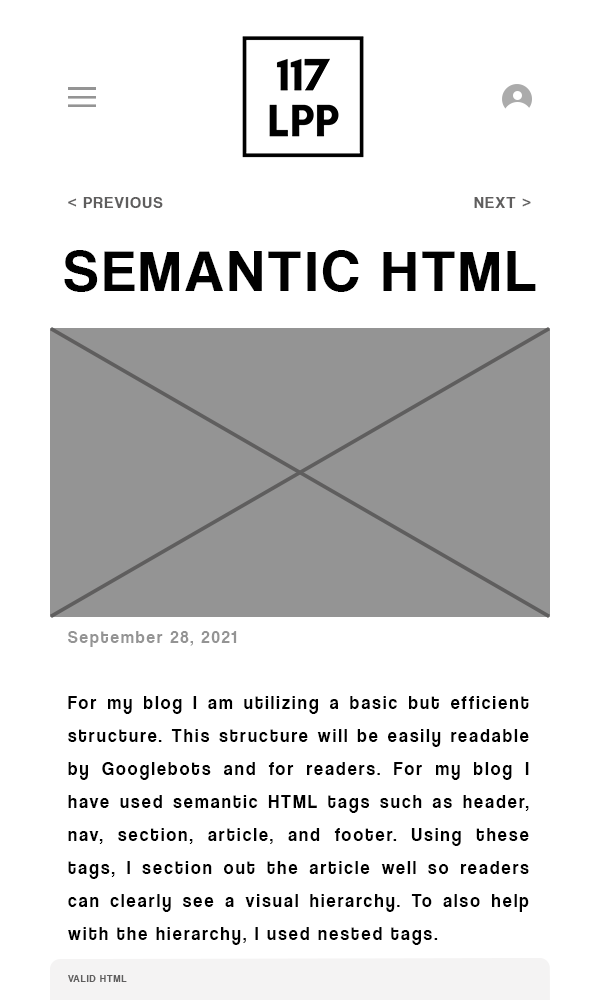
<style>
.page{position:relative;width:600px;height:1000px;background:#ffffff}
.page>*{position:absolute;margin:0}
.t1{font:16px "CoolveticaRg-Regular";letter-spacing:0.1em;color:#5f5e5e}
.t2{font:60px "CoolveticaRg-Regular";letter-spacing:0.075em;color:#000000}
.t3{font:18.5px/33px "CoolveticaRg-Regular";letter-spacing:0.12em;color:#000000}
.t4{font:17.3px/33px "CoolveticaRg-Regular";letter-spacing:0.12em;color:#949494}
.t5{font:10px "CoolveticaRg-Regular";letter-spacing:0.1em;color:#5f5e5e}
</style>
<div class="page">
<p class="t1" style="left:68px;top:197px;width:95px;height:11px">&lt; PREVIOUS</p>
<p class="t1" style="left:474px;top:197px;width:57px;height:11px">NEXT &gt;</p>
<p class="t2" style="left:64px;top:250px;width:472px;height:42px">SEMANTIC HTML</p>
<p class="t3" style="left:68px;top:631px;width:461px;height:314px"><span class="t4">September 28, 2021<br><br></span>For my blog I am utilizing a basic but efficient structure. This structure will be easily readable by Googlebots and for readers. For my blog I have used semantic HTML tags such as header, nav, section, article, and footer. Using these tags, I section out the article well so readers can clearly see a visual hierarchy. To also help with the hierarchy, I used nested tags.</p>
<p class="t5" style="left:68px;top:975px;width:59px;height:7px">VALID HTML</p>
</div>
